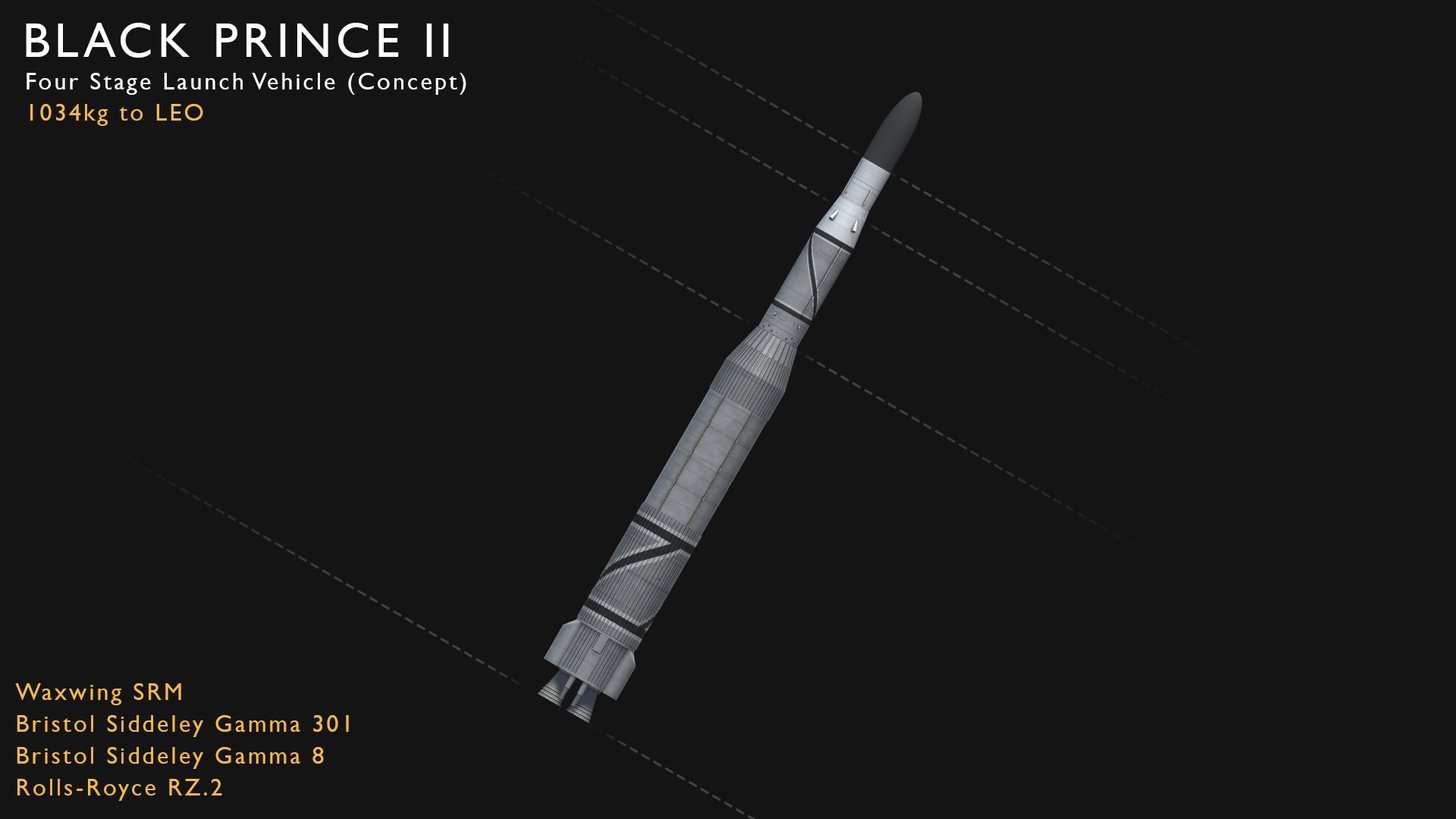
<style>
.page{position:relative;width:1456px;height:819px;background:#141414}
.page>*{position:absolute;margin:0}
.t1{font:48.5px "GillSansMT";letter-spacing:0.1em;color:#ffffff}
.t2{font:24.3px "GillSansMT";letter-spacing:0.1em;color:#ffffff}
.t3{font:24.3px "GillSansMT";letter-spacing:0.1em;color:#f4ba4a}
</style>
<div class="page">
<p class="t1" style="left:26px;top:23px;width:423px;height:35px">BLACK PRINCE II</p>
<p class="t2" style="left:27px;top:73px;width:439px;height:22px">Four Stage Launch Vehicle (Concept)</p>
<p class="t3" style="left:30px;top:104px;width:173px;height:22px">1034kg to LEO</p>
<p class="t3" style="left:15px;top:683px;width:166px;height:22px">Waxwing SRM</p>
<p class="t3" style="left:17px;top:715px;width:332px;height:22px">Bristol Siddeley Gamma 301</p>
<p class="t3" style="left:17px;top:747px;width:307px;height:22px">Bristol Siddeley Gamma 8</p>
<p class="t3" style="left:17px;top:779px;width:205px;height:22px">Rolls-Royce RZ.2</p>
</div>
